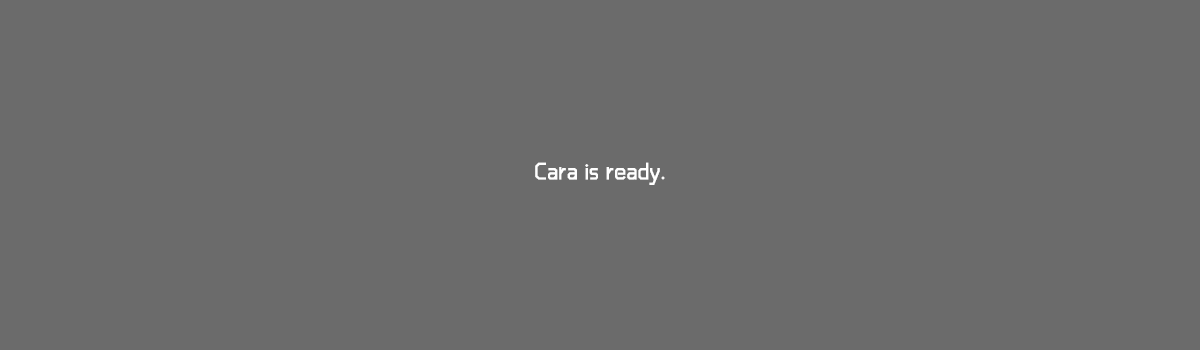
<style>
.page{position:relative;width:1200px;height:350px;background:#6b6b6b}
.page>*{position:absolute;margin:0}
.t1{font:24px "RTWSShangGoG0v1-Regular";letter-spacing:0.022em;color:#ffffff}
</style>
<div class="page">
<p class="t1" style="left:535px;top:162px;width:130px;height:23px">Cara is ready.</p>
</div>
